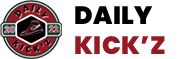
<style>
.page{position:relative;width:195px;height:59px;background:#ffffff}
.page>*{position:absolute;margin:0}
.t1{font:25px "Poppins-Black";letter-spacing:0.02em;color:#961a24}
.t2{font:25px "Poppins-Black";letter-spacing:0.02em;color:#000000}
</style>
<div class="page">
<p class="t1" style="left:75px;top:6px;width:90px;height:49px"><span class="t2">DAILY<br></span>KICK’Z</p>
</div>
